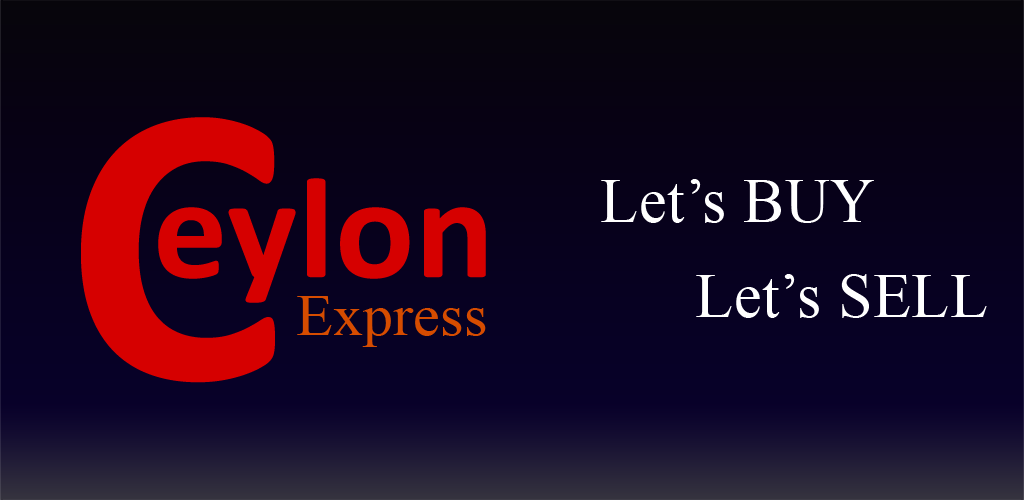
<style>
.page{position:relative;width:1024px;height:500px}
.page>*{position:absolute;margin:0}
.t1{font:405.6px "Calibri-Bold";letter-spacing:0.005em;color:#d60000}
.t2{font:144.7px "Calibri-Bold";letter-spacing:0.005em;color:#d60000}
.t3{font:62.5px "TimesNewRomanPSMT";letter-spacing:0.005em;color:#ffffff}
.t4{font:58.4px "TimesNewRomanPSMT";letter-spacing:0.005em;color:#d64c00}
</style>
<div class="page">
<p class="t1" style="left:81px;top:117px;width:194px;height:266px">C</p>
<p class="t2" style="left:158px;top:178px;width:328px;height:125px">eylon</p>
<p class="t3" style="left:601px;top:179px;width:273px;height:44px">Let’s BUY</p>
<p class="t3" style="left:696px;top:274px;width:291px;height:44px">Let’s SELL</p>
<p class="t4" style="left:297px;top:296px;width:189px;height:51px">Express</p>
</div>
